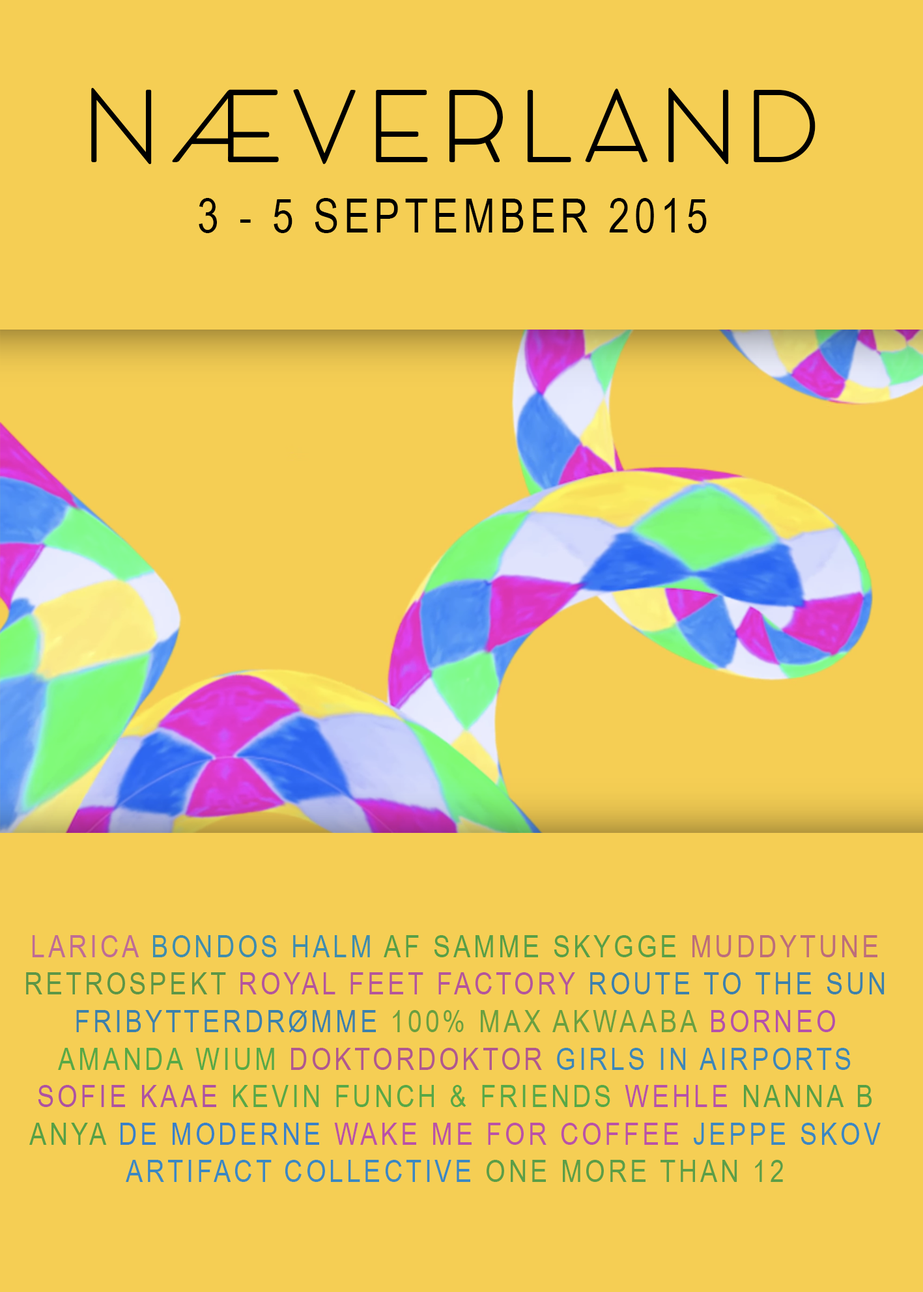
<style>
.page{position:relative;width:923px;height:1292px;background:#f5ce54}
.page>*{position:absolute;margin:0}
.t1{font:97.7px "COCOMAT-Light";letter-spacing:0.1em;color:#000000;text-transform:uppercase}
.t2{font:46.9px "ArialNarrow";letter-spacing:0.1em;color:#000000;text-transform:uppercase}
.t3{font:31.3px "ArialNarrow";letter-spacing:0.1em;color:#3c81ab;text-transform:uppercase}
.t4{font:31.3px "ArialNarrow";letter-spacing:0.1em;color:#bf6c94;text-transform:uppercase}
.t5{font:31.3px "ArialNarrow";letter-spacing:0.1em;color:#3e8dac;text-transform:uppercase}
.t6{font:31.3px "ArialNarrow";letter-spacing:0.1em;color:#589f46;text-transform:uppercase}
.t7{font:31.3px "ArialNarrow";letter-spacing:0.1em;color:#bd6d7a;text-transform:uppercase}
.t8{font:31.3px "ArialNarrow";letter-spacing:0.1em;color:#5c9646;text-transform:uppercase}
.t9{font:31.3px "ArialNarrow";letter-spacing:0.1em;color:#b4559b;text-transform:uppercase}
.t10{font:31.3px "ArialNarrow";letter-spacing:0.1em;color:#6aa040;text-transform:uppercase}
.t11{font:31.3px "ArialNarrow";letter-spacing:0.1em;color:#b551a9;text-transform:uppercase}
.t12{font:31.3px "ArialNarrow";letter-spacing:0.1em;color:#59a946;text-transform:uppercase}
.t13{font:31.3px "ArialNarrow";letter-spacing:0.1em;color:#b0588e;text-transform:uppercase}
.t14{font:31.3px "ArialNarrow";letter-spacing:0.1em;color:#3c87b7;text-transform:uppercase}
.t15{font:31.3px "ArialNarrow";letter-spacing:0.1em;color:#ae52a1;text-transform:uppercase}
.t16{font:31.3px "ArialNarrow";letter-spacing:0.1em;color:#58a846;text-transform:uppercase}
.t17{font:31.3px "ArialNarrow";letter-spacing:0.1em;color:#b652a8;text-transform:uppercase}
.t18{font:31.3px "ArialNarrow";letter-spacing:0.1em;color:#57a045;text-transform:uppercase}
.t19{font:31.3px "ArialNarrow";letter-spacing:0.1em;color:#3881c8;text-transform:uppercase}
.t20{font:31.3px "ArialNarrow";letter-spacing:0.1em;color:#ba52a6;text-transform:uppercase}
.t21{font:31.3px "ArialNarrow";letter-spacing:0.1em;color:#3b88c1;text-transform:uppercase}
.t22{font:31.3px "ArialNarrow";letter-spacing:0.1em;color:#5c9e47;text-transform:uppercase}
</style>
<div class="page">
<p class="t1" style="left:91px;top:88px;width:724px;height:76px">NÆVERLAND</p>
<p class="t2" style="left:199px;top:198px;width:508px;height:35px">3 - 5 SEPTEMBER 2015</p>
<p class="t3" style="left:26px;top:935px;width:858px;height:247px;text-align:center"><span class="t4">LARICA </span><span class="t5">BONDOS HALM </span><span class="t6">AF SAMME SKYGGE </span><span class="t7">MUDDYTUNE<br></span><span class="t8">retrospekt </span><span class="t9">royal feet factory </span>route to the sun<br>Fribytterdrømme <span class="t10">100% max akwaaba </span><span class="t11">Borneo<br></span><span class="t12">Amanda Wium </span><span class="t13">doktordoktor </span><span class="t14">girls in airports<br></span><span class="t15">sofie kaae </span><span class="t16">Kevin funch &amp; friends </span><span class="t17">wehle </span><span class="t18">Nanna b<br>Anya </span><span class="t19">de moderne </span><span class="t20">wake me for coffee </span><span class="t21">jeppe skov<br>artifact collective </span><span class="t22">one more than 12</span></p>
</div>
